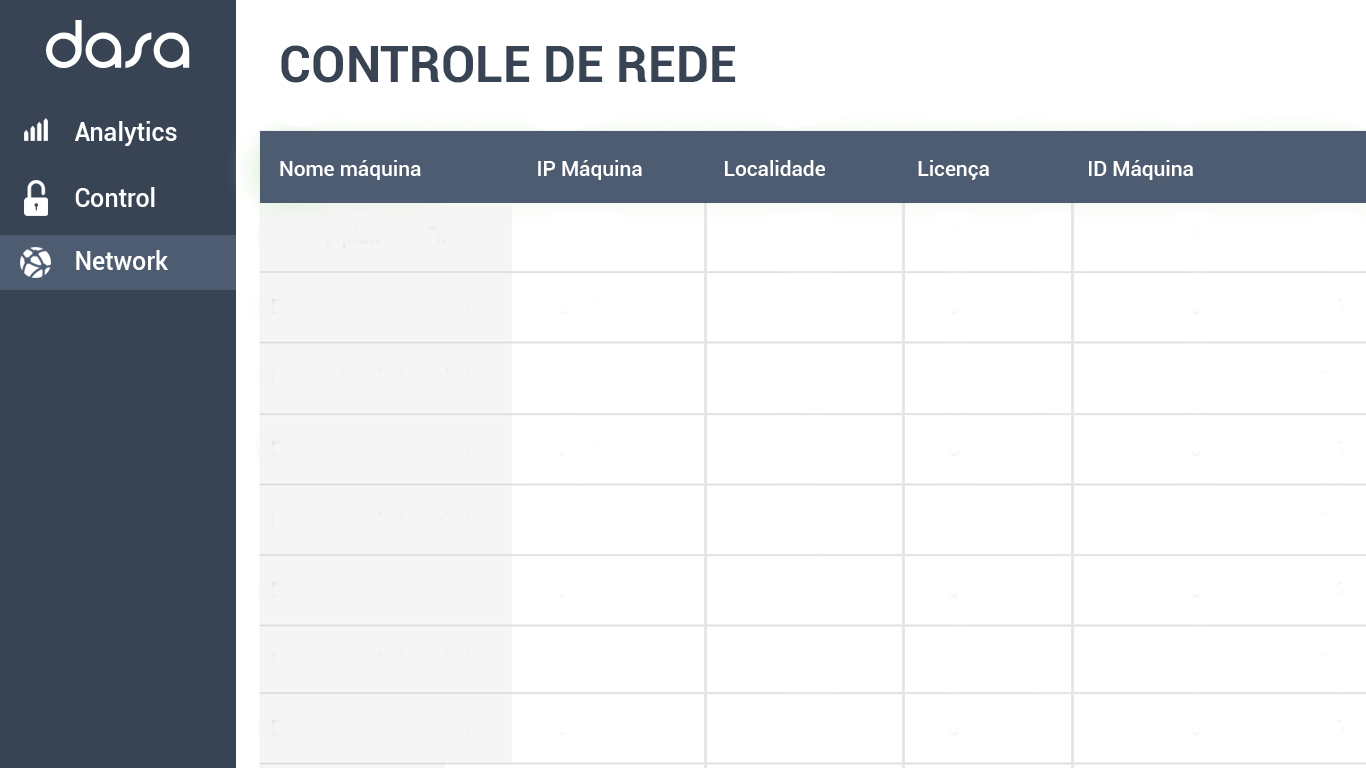
<style>
.page{position:relative;width:1366px;height:768px;background:#ffffff}
.page>*{position:absolute;margin:0}
.t1{font:50px "Roboto-Bold";color:#384454}
.t2{font:25px "Roboto-Medium";color:#ffffff}
.t3{font:20.8px "Roboto-Medium";color:#ffffff}
</style>
<div class="page">
<p class="t1" style="left:281px;top:45px;width:455px;height:38px">CONTROLE DE REDE</p>
<p class="t2" style="left:75px;top:121px;width:102px;height:25px">Analytics</p>
<p class="t3" style="left:280px;top:160px;width:141px;height:20px">Nome máquina</p>
<p class="t3" style="left:538px;top:160px;width:104px;height:20px">IP Máquina</p>
<p class="t3" style="left:725px;top:160px;width:100px;height:16px">Localidade</p>
<p class="t3" style="left:918px;top:160px;width:71px;height:20px">Licença</p>
<p class="t3" style="left:1089px;top:160px;width:104px;height:20px">ID Máquina</p>
<p class="t2" style="left:75px;top:187px;width:80px;height:20px">Control</p>
<p class="t2" style="left:76px;top:250px;width:92px;height:20px">Network</p>
</div>
